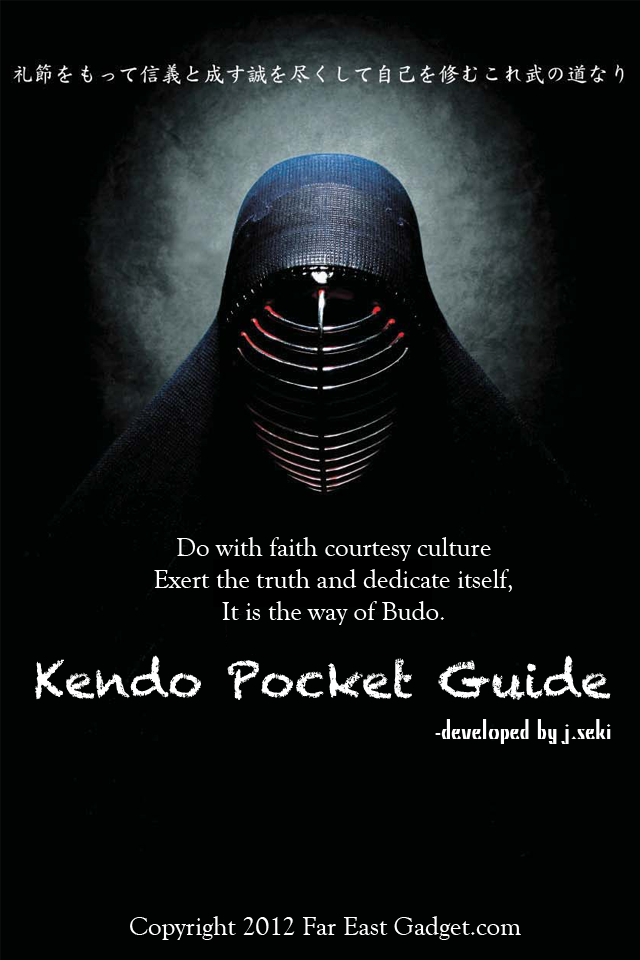
<style>
.page{position:relative;width:640px;height:960px;background:#000302}
.page>*{position:absolute;margin:0}
.t1{font:26.7px "GoudyOldStyleT-Regular";color:#ffffff}
.t2{font:48px "Chalkduster";color:#ffffff}
.t3{font:26.7px "KinoMT";color:#ffffff}
</style>
<div class="page">
<p class="t1" style="left:154px;top:537px;width:358px;height:88px;text-align:center">Do with faith courtesy culture<br>Exert the truth and dedicate itself,<br>It is the way of Budo.</p>
<p class="t2" style="left:35px;top:655px;width:576px;height:45px">Kendo Pocket Guide</p>
<p class="t3" style="left:435px;top:719px;width:176px;height:25px">-developed by j.seki</p>
<p class="t1" style="left:130px;top:916px;width:391px;height:24px">Copyright 2012 Far East Gadget.com</p>
</div>
